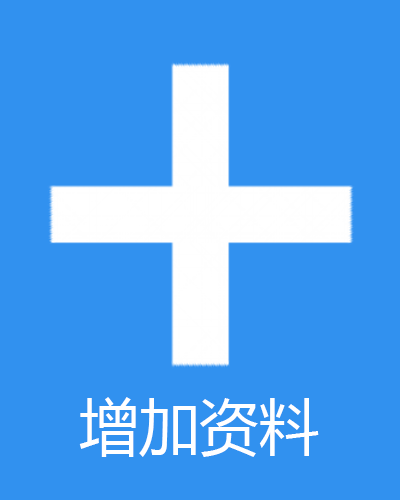
<style>
.page{position:relative;width:400px;height:500px;background:#3191ef}
.page>*{position:absolute;margin:0}
.t1{font:60px "MicrosoftYaHei";color:#ffffff}
</style>
<div class="page">
<p class="t1" style="left:79px;top:397px;width:240px;height:60px">增加资料</p>
</div>
